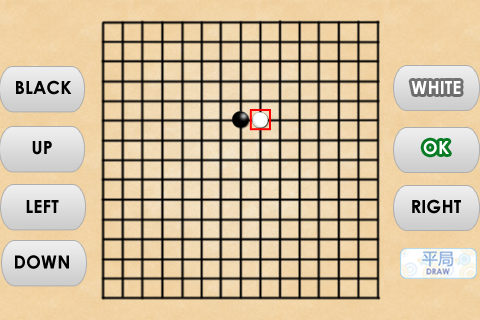
<style>
.page{position:relative;width:480px;height:320px}
.page>*{position:absolute;margin:0}
.t1{font:18px "CenturyGothic-Bold";color:#000000}
.t2{font:18px "CenturyGothic-Bold";color:#ffffff}
</style>
<div class="page">
<p class="t1" style="left:16px;top:80px;width:56px;height:15px">BLACK</p>
<p class="t2" style="left:411px;top:81px;width:50px;height:13px">WHITE</p>
<p class="t1" style="left:32px;top:141px;width:20px;height:14px">UP</p>
<p class="t2" style="left:423px;top:140px;width:26px;height:15px">OK</p>
<p class="t1" style="left:26px;top:200px;width:33px;height:13px">LEFT</p>
<p class="t1" style="left:412px;top:199px;width:49px;height:15px">RIGHT</p>
<p class="t1" style="left:15px;top:255px;width:54px;height:14px">DOWN</p>
</div>
